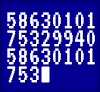
<style>
.page{position:relative;width:100px;height:92px;background:#030092}
.page>*{position:absolute;margin:0}
.t1{font:27px/18px "VT323-Regular";letter-spacing:0.005em;color:#ffffff}
</style>
<div class="page">
<p class="t1" style="left:7px;top:12px;width:88px;height:71px">58630101<br>75329940<br>58630101<br>753</p>
</div>
